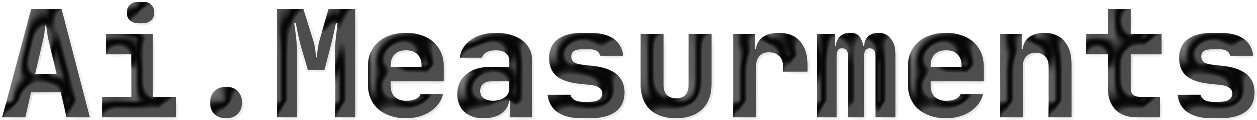
<style>
.page{position:relative;width:1257px;height:120px;background:#ffffff}
.page>*{position:absolute;margin:0}
.t1{font:150px "JetBrainsMono-ExtraBold"}
</style>
<div class="page">
<p class="t1" style="left:2px;top:2px;width:1253px;height:116px">Ai.Measurments</p>
<p class="t1" style="left:2px;top:2px;width:1253px;height:116px">Ai.Measurments</p>
</div>
